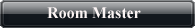
<style>
.page{position:relative;width:195px;height:28px}
.page>*{position:absolute;margin:0}
.t1{font:16px "TimesNewRomanPS-BoldMT";color:#fbf4f4}
</style>
<div class="page">
<p class="t1" style="left:47px;top:7px;width:94px;height:12px">Room Master</p>
</div>
